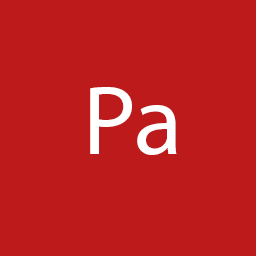
<style>
.page{position:relative;width:256px;height:256px;background:#bd1b1b}
.page>*{position:absolute;margin:0}
.t1{font:100px "MyriadPro-Regular";color:#ffffff}
</style>
<div class="page">
<p class="t1" style="left:90px;top:87px;width:87px;height:68px">Pa</p>
</div>
